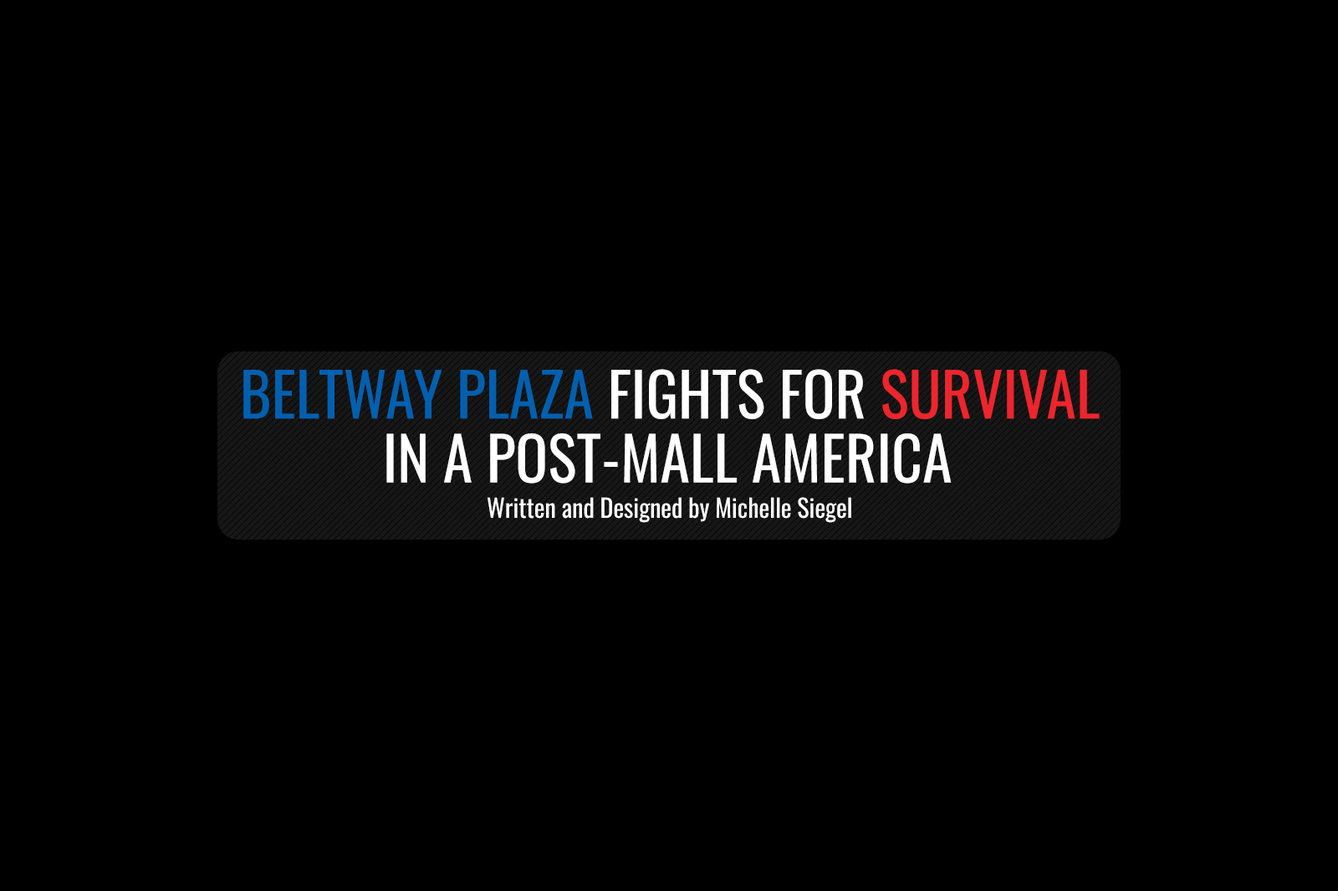
<style>
.page{position:relative;width:1338px;height:891px;background:#000000}
.page>*{position:absolute;margin:0}
.t1{font:60.2px "Oswald-Regular";color:#0060af}
.t2{font:60.2px "Oswald-Regular";color:#ffffff}
.t3{font:60.2px "Oswald-Regular";color:#ed252d}
.t4{font:25.1px "Oswald-Regular";color:#ffffff}
</style>
<div class="page">
<p class="t1" style="left:243px;top:369px;width:857px;height:50px">BELTWAY PLAZA<span class="t2"> FIGHTS FOR </span><span class="t3">SURVIVAL</span></p>
<p class="t2" style="left:386px;top:433px;width:566px;height:51px">IN A POST-MALL AMERICA</p>
<p class="t4" style="left:488px;top:497px;width:364px;height:26px">Written and Designed by Michelle Siegel</p>
</div>
